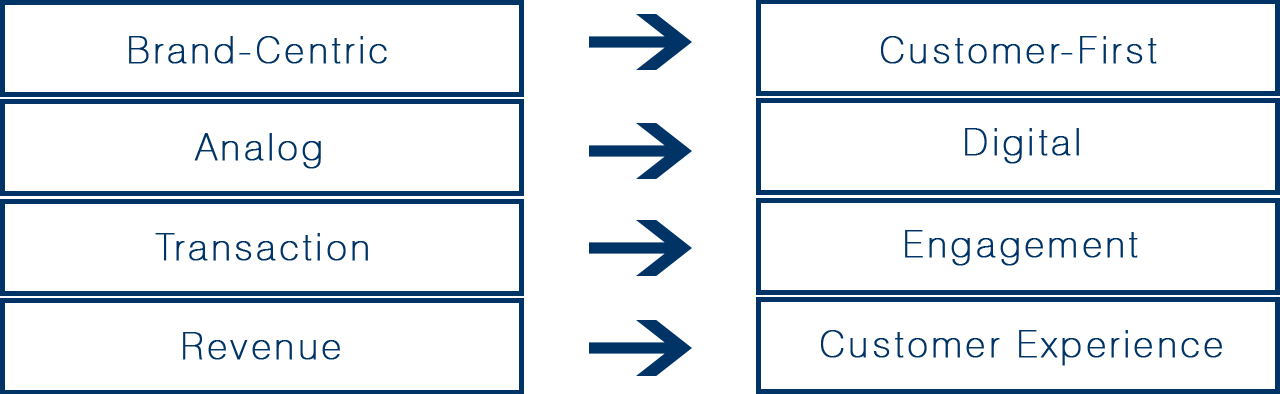
<style>
.page{position:relative;width:1280px;height:394px;background:#ffffff}
.page>*{position:absolute;margin:0}
.t1{font:37.2px "font446";letter-spacing:0.08em;color:#003366;font-weight:bold}
</style>
<div class="page">
<p class="t1" style="left:129px;top:36px;width:258px;height:28px">Brand-Centric</p>
<p class="t1" style="left:881px;top:36px;width:276px;height:28px">Customer-First</p>
<p class="t1" style="left:194px;top:133px;width:127px;height:36px">Analog</p>
<p class="t1" style="left:965px;top:128px;width:114px;height:36px">Digital</p>
<p class="t1" style="left:155px;top:233px;width:213px;height:28px">Transaction</p>
<p class="t1" style="left:905px;top:230px;width:233px;height:36px">Engagement</p>
<p class="t1" style="left:183px;top:332px;width:157px;height:28px">Revenue</p>
<p class="t1" style="left:821px;top:330px;width:401px;height:36px">Customer Experience</p>
</div>
